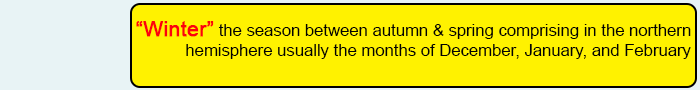
<style>
.page{position:relative;width:700px;height:90px;background:#fff200}
.page>*{position:absolute;margin:0}
.t1{font:16.7px "ArialMT";color:#020202}
.t2{font:20.8px "ArialMT";color:#fd010d;font-weight:bold}
</style>
<div class="page">
<p class="t1" style="left:136px;top:21px;width:555px;height:38px"><span class="t2">“Winter”</span> the season between autumn &amp; spring comprising in the northern<br>    hemisphere usually the months of December, January, and February</p>
</div>
